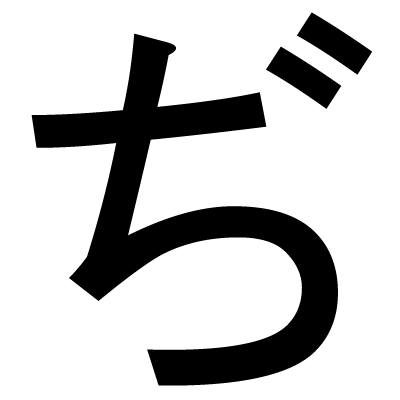
<style>
.page{position:relative;width:400px;height:400px;background:#ffffff}
.page>*{position:absolute;margin:0}
.t1{font:416.7px "MS-PGothic";color:#000000}
</style>
<div class="page">
<p class="t1" style="left:31px;top:12px;width:342px;height:374px">ぢ</p>
</div>
